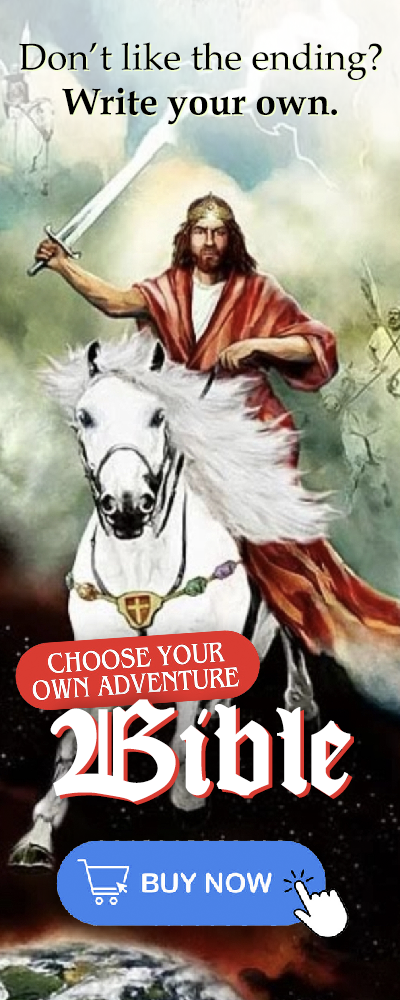
<style>
.page{position:relative;width:400px;height:1000px}
.page>*{position:absolute;margin:0}
.t1{font:37.2px "BookAntiqua";color:#000000}
.t2{font:37.2px "BookAntiqua-Bold";color:#000000}
.t3{font:37.2px "BookAntiqua"}
.t4{font:37.2px "BookAntiqua-Bold"}
.t5{font:114.4px "KJV1611";color:#ffffff}
</style>
<div class="page">
<p class="t1" style="left:19px;top:42px;width:363px;height:83px;text-align:center">Don’t like the ending?<br><span class="t2">Write your own.</span></p>
<p class="t3" style="left:20px;top:44px;width:364px;height:82px;text-align:center">Don’t like the ending?<br><span class="t4">Write your own.</span></p>
<p class="t5" style="left:50px;top:699px;width:301px;height:103px">Bible</p>
<p class="t5" style="left:54px;top:702px;width:300px;height:103px">Bible</p>
</div>
